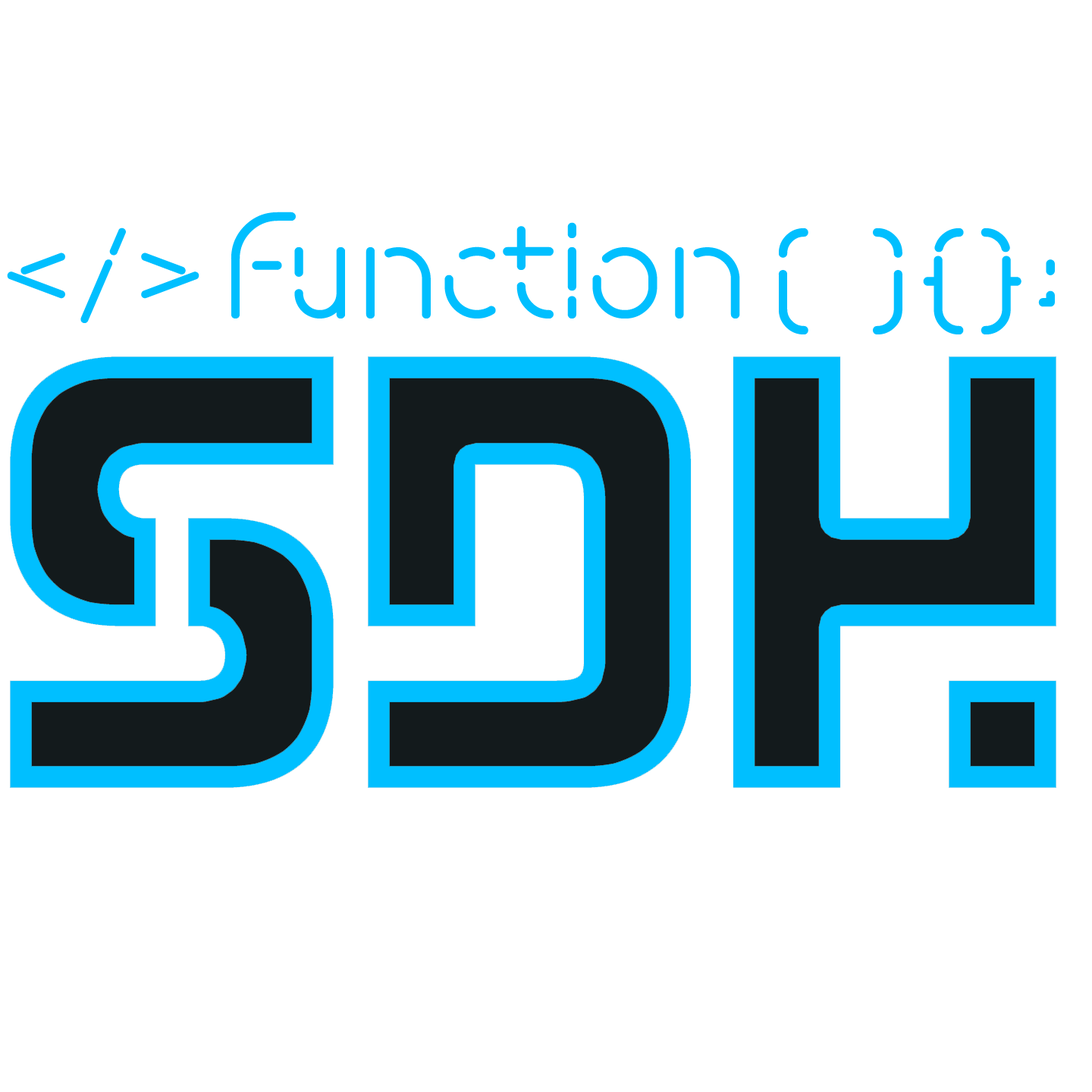
<style>
.page{position:relative;width:1092px;height:1092px;background:#ffffff}
.page>*{position:absolute;margin:0}
.t1{font:151.7px "SpaceFuture";color:#00bfff}
.t2{font:135.6px "SpaceFuture";color:#00bfff}
</style>
<div class="page">
<p class="t1" style="left:231px;top:212px;width:509px;height:106px">function</p>
<p class="t2" style="left:7px;top:227px;width:192px;height:96px">&lt;/&gt;</p>
<p class="t1" style="left:778px;top:227px;width:277px;height:107px">( ){};</p>
</div>
